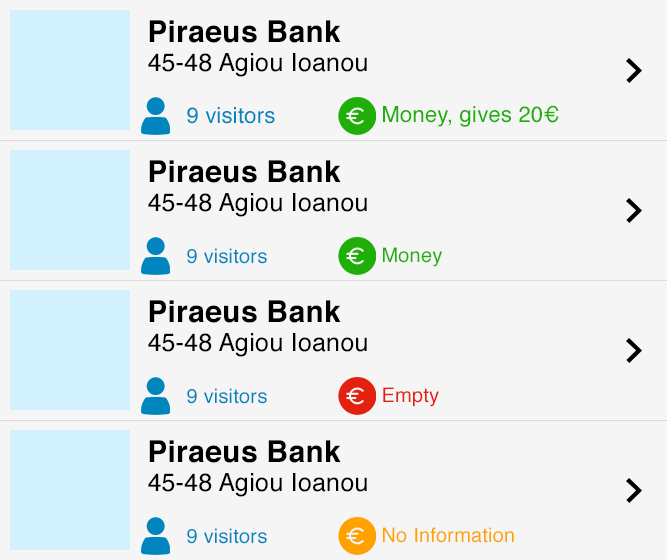
<style>
.page{position:relative;width:667px;height:560px;background:#f5f5f5}
.page>*{position:absolute;margin:0}
.t1{font:30px "Helvetica-Bold";letter-spacing:0.01em;color:#000000}
.t2{font:25px "Helvetica";letter-spacing:0.01em;color:#000000}
.t3{font:22px "Helvetica";letter-spacing:0.01em;color:#0085bf}
.t4{font:22px "Helvetica";letter-spacing:0.01em;color:#20af09}
.t5{font:20px "Helvetica";letter-spacing:0.01em;color:#0085bf}
.t6{font:20px "Helvetica";letter-spacing:0.01em;color:#20af09}
.t7{font:20px "Helvetica";letter-spacing:0.01em;color:#e42011}
.t8{font:20px "Helvetica";letter-spacing:0.01em;color:#ffa200}
</style>
<div class="page">
<p class="t1" style="left:149px;top:20px;width:192px;height:23px">Piraeus Bank</p>
<p class="t2" style="left:148px;top:53px;width:219px;height:24px">45-48 Agiou Ioanou</p>
<p class="t3" style="left:187px;top:107px;width:88px;height:17px">9 visitors</p>
<p class="t4" style="left:383px;top:105px;width:176px;height:22px">Money, gives 20€</p>
<p class="t1" style="left:149px;top:160px;width:192px;height:23px">Piraeus Bank</p>
<p class="t2" style="left:148px;top:193px;width:219px;height:24px">45-48 Agiou Ioanou</p>
<p class="t5" style="left:187px;top:248px;width:80px;height:16px">9 visitors</p>
<p class="t6" style="left:383px;top:247px;width:59px;height:20px">Money</p>
<p class="t1" style="left:149px;top:300px;width:192px;height:23px">Piraeus Bank</p>
<p class="t2" style="left:148px;top:333px;width:219px;height:24px">45-48 Agiou Ioanou</p>
<p class="t5" style="left:187px;top:388px;width:80px;height:16px">9 visitors</p>
<p class="t7" style="left:383px;top:387px;width:56px;height:20px">Empty</p>
<p class="t1" style="left:149px;top:440px;width:192px;height:23px">Piraeus Bank</p>
<p class="t2" style="left:148px;top:473px;width:219px;height:24px">45-48 Agiou Ioanou</p>
<p class="t5" style="left:187px;top:528px;width:80px;height:16px">9 visitors</p>
<p class="t8" style="left:383px;top:527px;width:131px;height:16px">No Information</p>
</div>
